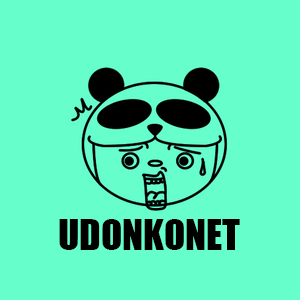
<style>
.page{position:relative;width:300px;height:300px;background:#66fecb}
.page>*{position:absolute;margin:0}
.t1{font:38.9px "Impact";color:#000000}
</style>
<div class="page">
<p class="t1" style="left:59px;top:219px;width:181px;height:31px">UDONKONET</p>
</div>
